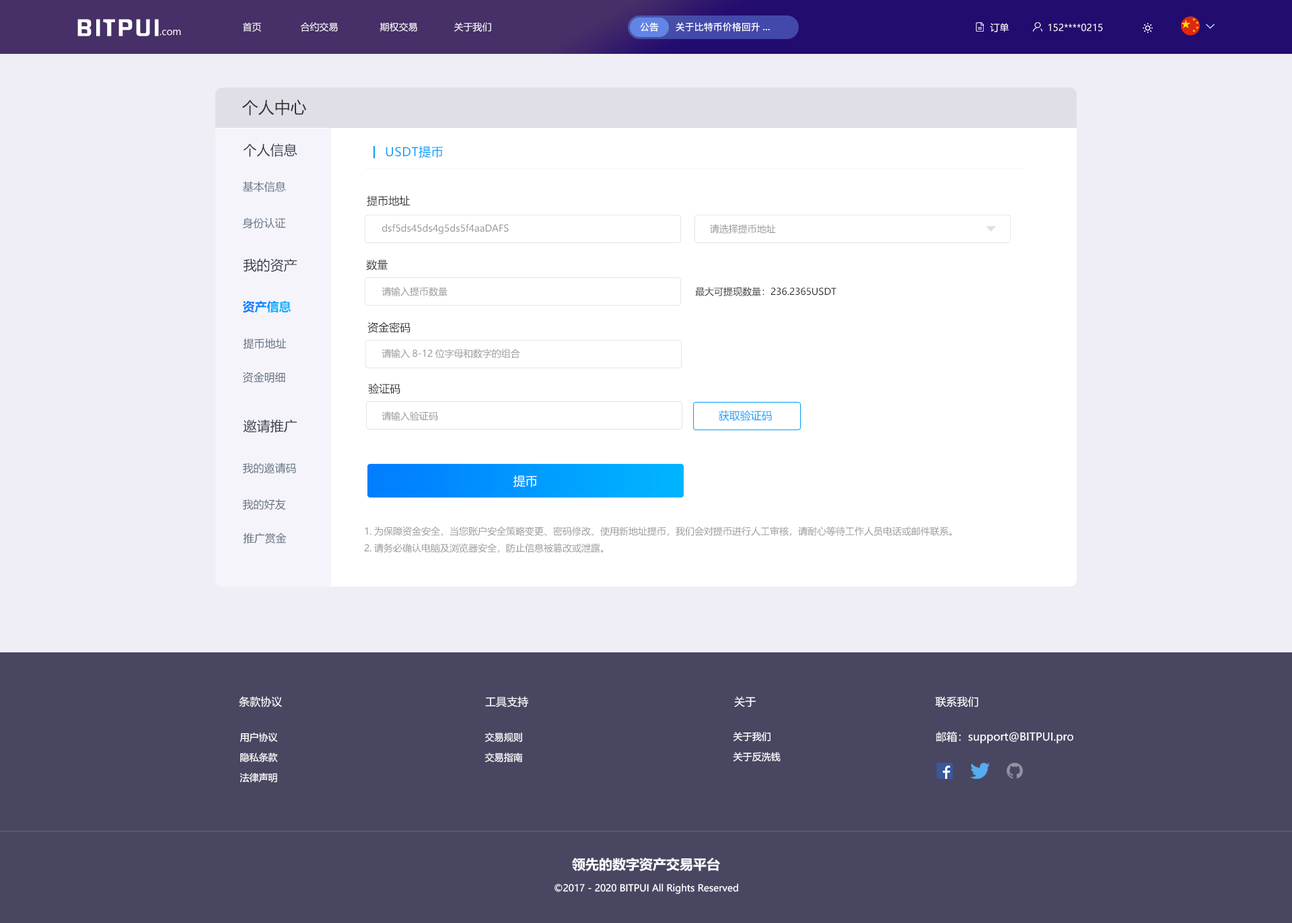
<style>
.page{position:relative;width:1292px;height:923px;background:#efeef7}
.page>*{position:absolute;margin:0}
.t1{font:20.6px "FZHZGBJW--GB1-0";letter-spacing:0.1em;color:#ffffff;scale:1.14 1}
.t2{font:9.4px "MicrosoftYaHei";color:#ffffff}
.t3{font:9.4px "PingFang-SC-Bold";color:#ffffff}
.t4{font:16.2px "MicrosoftYaHei";color:#333333}
.t5{font:13.5px "MicrosoftYaHei";color:#303b47}
.t6{font:12.1px "MicrosoftYaHei";letter-spacing:0.03em;color:#009dfa}
.t7{font:10.8px "MicrosoftYaHei";color:#637282}
.t8{font:10.8px "MicrosoftYaHei";color:#333333}
.t9{font:9.4px "MicrosoftYaHei";color:#999999}
.t10{font:9.4px "MicrosoftYaHei";color:#333333}
.t11{font:12.1px "MicrosoftYaHei-Bold"}
.t12{font:10.8px "MicrosoftYaHei";color:#009dfa}
.t13{font:12.1px "MicrosoftYaHei";color:#ffffff}
.t14{font:10.8px "MicrosoftYaHei";color:#ffffff}
.t15{font:9.4px/20.2px "MicrosoftYaHei";color:#ffffff}
.t16{font:13.5px "MicrosoftYaHei-Bold";color:#ffffff}
</style>
<div class="page">
<p class="t1" style="left:77px;top:19px;width:82px;height:17px">BITPUI</p>
<p class="t2" style="left:160px;top:30px;width:21px;height:6px">.com</p>
<p class="t2" style="left:243px;top:22px;width:248px;height:10px">首页              合约交易               期权交易             关于我们</p>
<p class="t3" style="left:640px;top:22px;width:19px;height:10px">公告</p>
<p class="t3" style="left:676px;top:22px;width:94px;height:10px">关于比特币价格回升...</p>
<p class="t2" style="left:990px;top:23px;width:19px;height:9px">订单</p>
<p class="t2" style="left:1049px;top:24px;width:54px;height:8px">152****0215</p>
<p class="t4" style="left:242px;top:100px;width:65px;height:16px">个人中心</p>
<p class="t5" style="left:243px;top:143px;width:54px;height:14px">个人信息</p>
<p class="t6" style="left:386px;top:146px;width:57px;height:12px">USDT提币</p>
<p class="t7" style="left:242px;top:181px;width:44px;height:11px">基本信息</p>
<p class="t8" style="left:367px;top:195px;width:43px;height:11px">提币地址</p>
<p class="t7" style="left:242px;top:217px;width:44px;height:12px">身份认证</p>
<p class="t9" style="left:382px;top:223px;width:127px;height:11px">dsf5ds45ds4g5ds5f4aaDAFS</p>
<p class="t9" style="left:710px;top:224px;width:66px;height:10px">请选择提币地址</p>
<p class="t5" style="left:243px;top:258px;width:54px;height:14px">我的资产</p>
<p class="t8" style="left:366px;top:259px;width:22px;height:12px">数量</p>
<p class="t9" style="left:382px;top:287px;width:66px;height:9px">请输入提币数量</p>
<p class="t10" style="left:695px;top:287px;width:142px;height:9px">最大可提现数量：236.2365USDT</p>
<p class="t11" style="left:242px;top:301px;width:49px;height:12px">资产信息</p>
<p class="t8" style="left:367px;top:322px;width:44px;height:11px">资金密码</p>
<p class="t7" style="left:243px;top:338px;width:44px;height:11px">提币地址</p>
<p class="t9" style="left:382px;top:349px;width:138px;height:9px">请输入8-12位字母和数字的组合</p>
<p class="t7" style="left:242px;top:372px;width:43px;height:11px">资金明细</p>
<p class="t8" style="left:368px;top:383px;width:32px;height:11px">验证码</p>
<p class="t9" style="left:382px;top:411px;width:56px;height:10px">请输入验证码</p>
<p class="t12" style="left:719px;top:410px;width:53px;height:11px">获取验证码</p>
<p class="t5" style="left:243px;top:419px;width:54px;height:14px">邀请推广</p>
<p class="t7" style="left:242px;top:462px;width:54px;height:11px">我的邀请码</p>
<p class="t13" style="left:514px;top:475px;width:23px;height:12px">提币</p>
<p class="t7" style="left:242px;top:499px;width:44px;height:11px">我的好友</p>
<p class="t7" style="left:243px;top:532px;width:44px;height:12px">推广赏金</p>
<p class="t9" style="left:364px;top:526px;width:588px;height:27px">1.为保障资金安全，当您账户安全策略变更、密码修改、使用新地址提币，我们会对提币进行人工审核，请耐心等待工作人员电话或邮件联系。<br>2.请务必确认电脑及浏览器安全，防止信息被篡改或泄露。</p>
<p class="t14" style="left:239px;top:696px;width:43px;height:11px">条款协议</p>
<p class="t14" style="left:485px;top:696px;width:43px;height:11px">工具支持</p>
<p class="t14" style="left:734px;top:696px;width:23px;height:11px">关于</p>
<p class="t14" style="left:936px;top:696px;width:43px;height:11px">联系我们</p>
<p class="t15" style="left:240px;top:732px;width:38px;height:50px;text-align:center">用户协议<br>隐私条款<br>法律声明</p>
<p class="t15" style="left:485px;top:732px;width:38px;height:30px">交易规则<br>交易指南</p>
<p class="t15" style="left:733px;top:732px;width:48px;height:29px">关于我们<br>关于反洗钱</p>
<p class="t14" style="left:936px;top:731px;width:138px;height:13px">邮箱：support@BITPUI.pro</p>
<p class="t16" style="left:572px;top:857px;width:148px;height:14px">领先的数字资产交易平台</p>
<p class="t2" style="left:555px;top:883px;width:183px;height:11px">©2017 - 2020 BITPUI All Rights Reserved</p>
</div>
